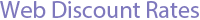
<style>
.page{position:relative;width:200px;height:20px;background:#ffffff}
.page>*{position:absolute;margin:0}
.t1{font:24px "MyriadPro-Regular";color:#7e78bd}
</style>
<div class="page">
<p class="t1" style="left:0px;top:1px;width:199px;height:17px">Web Discount Rates</p>
</div>
